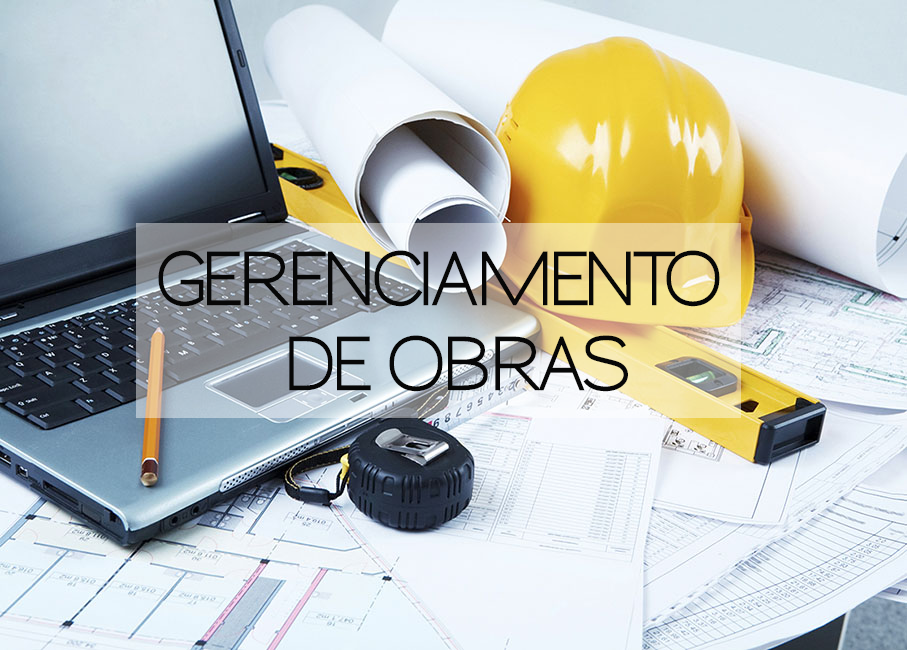
<style>
.page{position:relative;width:907px;height:650px}
.page>*{position:absolute;margin:0}
.t1{font:70.9px "Sansumi-Bold";letter-spacing:-0.05em;color:#070707;scale:0.9 1}
</style>
<div class="page">
<p class="t1" style="left:158px;top:250px;width:562px;height:142px;text-align:center">GERENCIAMENTO <br>DE OBRAS</p>
</div>
